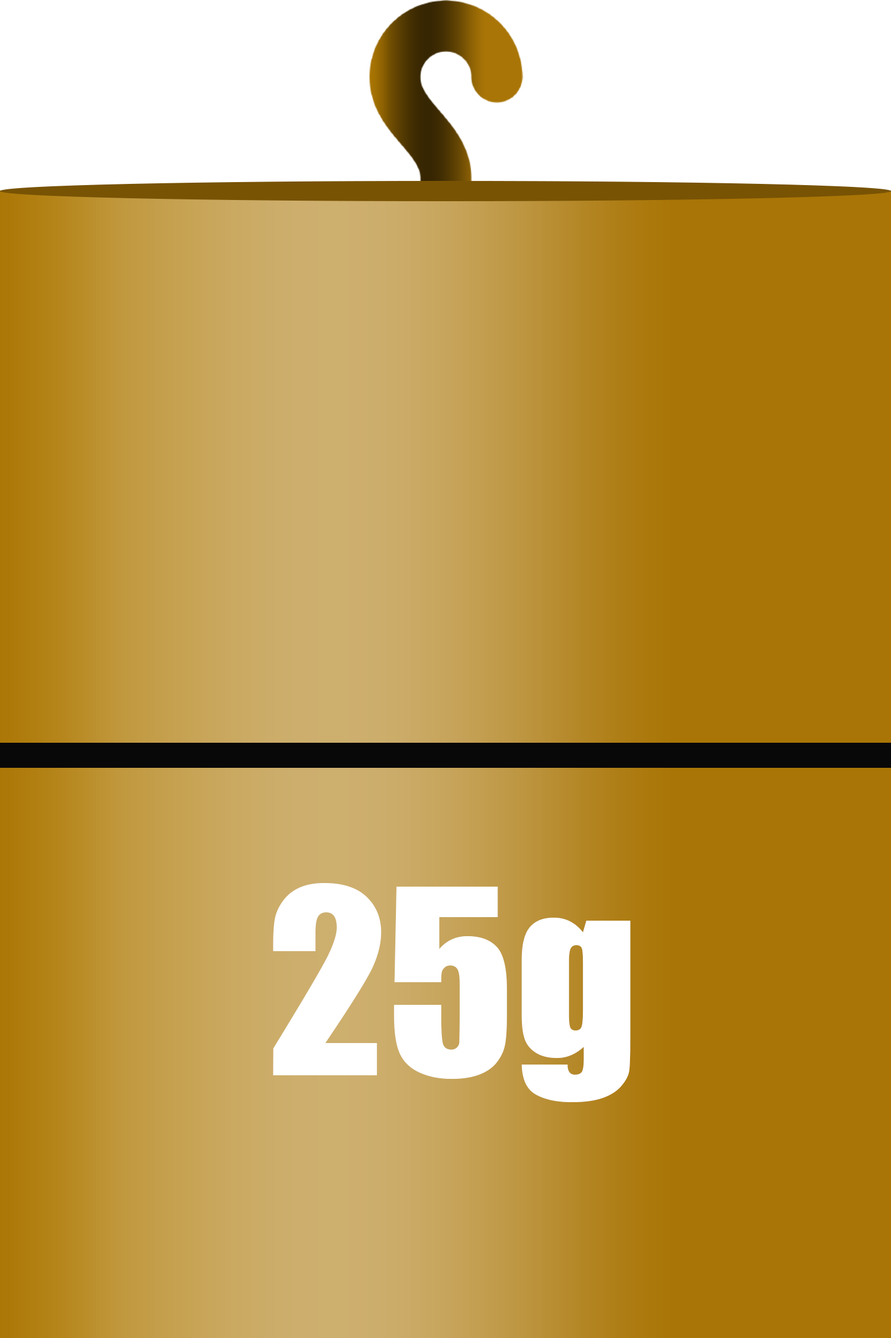
<style>
.page{position:relative;width:891px;height:1338px;background:#a97506}
.page>*{position:absolute;margin:0}
.t1{font:238.9px "Impact";color:#ffffff}
</style>
<div class="page">
<p class="t1" style="left:273px;top:883px;width:358px;height:219px">25g</p>
</div>
